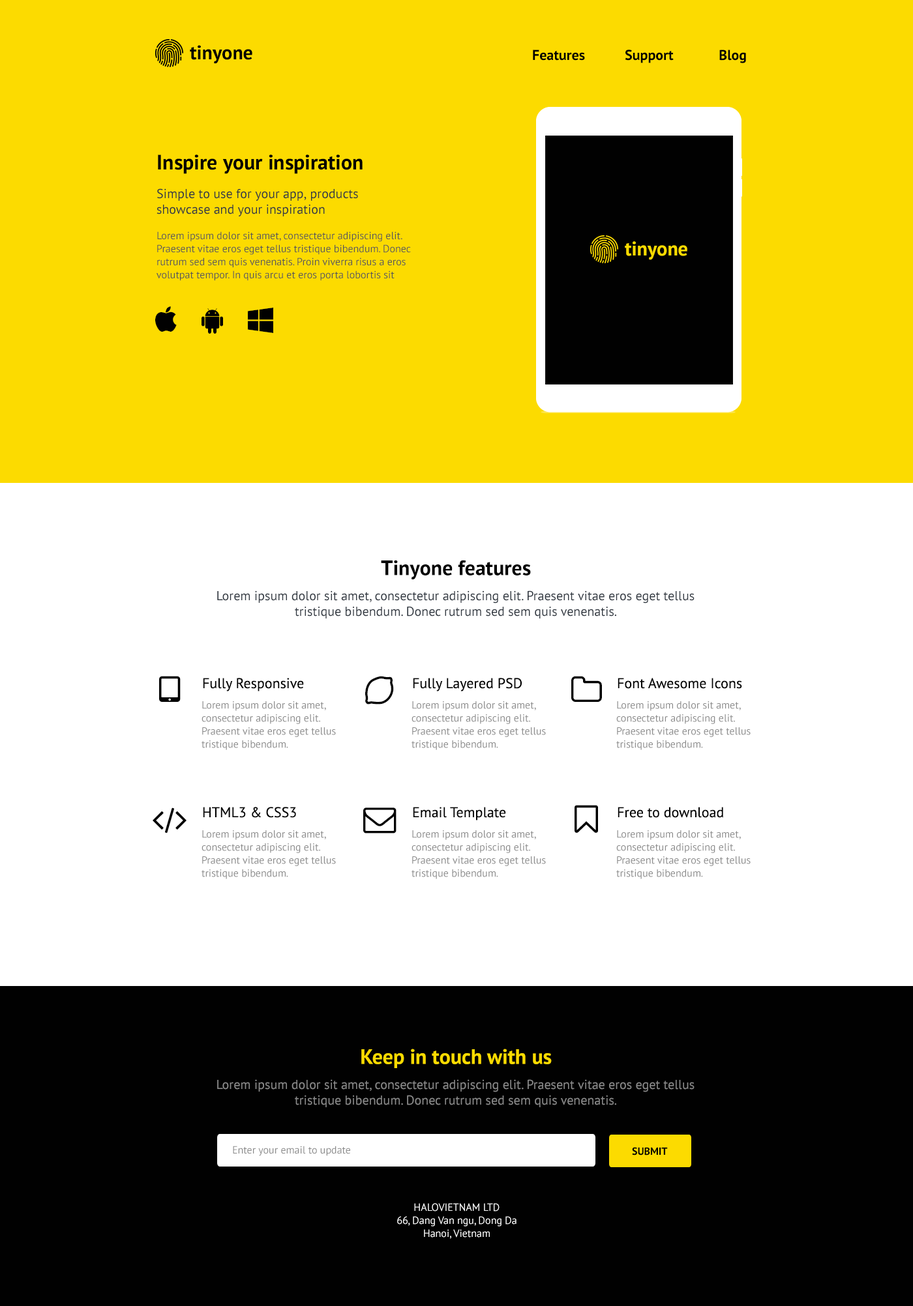
<style>
.page{position:relative;width:913px;height:1306px;background:#ffffff}
.page>*{position:absolute;margin:0}
.t1{font:19.6px "PTSans-Bold";color:#010101}
.t2{font:14.3px "PTSans-Bold";color:#010101}
.t3{font:20.9px "PTSans-Bold";color:#010101}
.t4{font:13px/15.6px "PTSans-Regular";color:#313841}
.t5{font:10.4px/13px "PTSans-Regular";color:#555555}
.t6{font:19.6px "PTSans-Bold";color:#fcdb00}
.t7{font:14.3px "PTSans-Regular";color:#010101}
.t8{font:10.4px/13px "PTSans-Regular";color:#898989}
.t9{font:20.9px "PTSans-Bold";color:#fcdb00}
.t10{font:13px/15.6px "PTSans-Regular";color:#898989}
.t11{font:10.4px "PTSans-Regular";color:#898989}
.t12{font:10.4px "PTSans-Bold";color:#010101;text-transform:uppercase}
.t13{font:10.4px/13px "PTSans-Regular";color:#ffffff}
</style>
<div class="page">
<p class="t1" style="left:190px;top:45px;width:62px;height:19px">tinyone</p>
<p class="t2" style="left:533px;top:50px;width:52px;height:11px">Features</p>
<p class="t2" style="left:625px;top:50px;width:48px;height:13px">Support</p>
<p class="t2" style="left:719px;top:50px;width:27px;height:13px">Blog</p>
<p class="t3" style="left:158px;top:155px;width:204px;height:19px">Inspire your inspiration</p>
<p class="t4" style="left:156px;top:188px;width:202px;height:28px">Simple to use for your app, products showcase and your inspiration</p>
<p class="t5" style="left:156px;top:231px;width:255px;height:50px">Lorem ipsum dolor sit amet, consectetur adipiscing elit. Praesent vitae eros eget tellus tristique bibendum. Donec rutrum sed sem quis venenatis. Proin viverra risus a eros volutpat tempor. In quis arcu et eros porta lobortis sit</p>
<p class="t6" style="left:625px;top:241px;width:62px;height:19px">tinyone</p>
<p class="t3" style="left:381px;top:560px;width:150px;height:20px">Tinyone features</p>
<p class="t4" style="left:217px;top:591px;width:477px;height:28px;text-align:center">Lorem ipsum dolor sit amet, consectetur adipiscing elit. Praesent vitae eros eget tellus tristique bibendum. Donec rutrum sed sem quis venenatis.</p>
<p class="t7" style="left:203px;top:678px;width:101px;height:14px">Fully Responsive</p>
<p class="t7" style="left:413px;top:678px;width:109px;height:14px">Fully Layered PSD</p>
<p class="t7" style="left:617px;top:678px;width:125px;height:11px">Font Awesome Icons</p>
<p class="t8" style="left:201px;top:701px;width:135px;height:49px">Lorem ipsum dolor sit amet, consectetur adipiscing elit. Praesent vitae eros eget tellus tristique bibendum.</p>
<p class="t8" style="left:411px;top:701px;width:135px;height:49px">Lorem ipsum dolor sit amet, consectetur adipiscing elit. Praesent vitae eros eget tellus tristique bibendum.</p>
<p class="t8" style="left:616px;top:701px;width:134px;height:49px">Lorem ipsum dolor sit amet, consectetur adipiscing elit. Praesent vitae eros eget tellus tristique bibendum.</p>
<p class="t7" style="left:203px;top:807px;width:93px;height:11px">HTML3 &amp; CSS3</p>
<p class="t7" style="left:413px;top:807px;width:93px;height:14px">Email Template</p>
<p class="t7" style="left:617px;top:807px;width:106px;height:11px">Free to download</p>
<p class="t8" style="left:201px;top:831px;width:135px;height:48px">Lorem ipsum dolor sit amet, consectetur adipiscing elit. Praesent vitae eros eget tellus tristique bibendum.</p>
<p class="t8" style="left:411px;top:831px;width:135px;height:48px">Lorem ipsum dolor sit amet, consectetur adipiscing elit. Praesent vitae eros eget tellus tristique bibendum.</p>
<p class="t8" style="left:616px;top:831px;width:134px;height:48px">Lorem ipsum dolor sit amet, consectetur adipiscing elit. Praesent vitae eros eget tellus tristique bibendum.</p>
<p class="t9" style="left:361px;top:1049px;width:191px;height:20px">Keep in touch with us</p>
<p class="t10" style="left:217px;top:1080px;width:477px;height:28px;text-align:center">Lorem ipsum dolor sit amet, consectetur adipiscing elit. Praesent vitae eros eget tellus tristique bibendum. Donec rutrum sed sem quis venenatis.</p>
<p class="t11" style="left:233px;top:1146px;width:117px;height:11px">Enter your email to update</p>
<p class="t12" style="left:632px;top:1147px;width:36px;height:9px">SUBMIT</p>
<p class="t13" style="left:397px;top:1203px;width:119px;height:36px;text-align:center">HALOVIETNAM LTD<br>66, Dang Van ngu, Dong Da<br>Hanoi, Vietnam</p>
</div>
